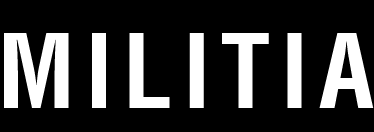
<style>
.page{position:relative;width:374px;height:132px;background:#000000}
.page>*{position:absolute;margin:0}
.t1{font:100px "Helvetica-Condensed-Bold";letter-spacing:0.1em;color:#ffffff}
</style>
<div class="page">
<p class="t1" style="left:4px;top:33px;width:370px;height:75px">MILITIA</p>
</div>
